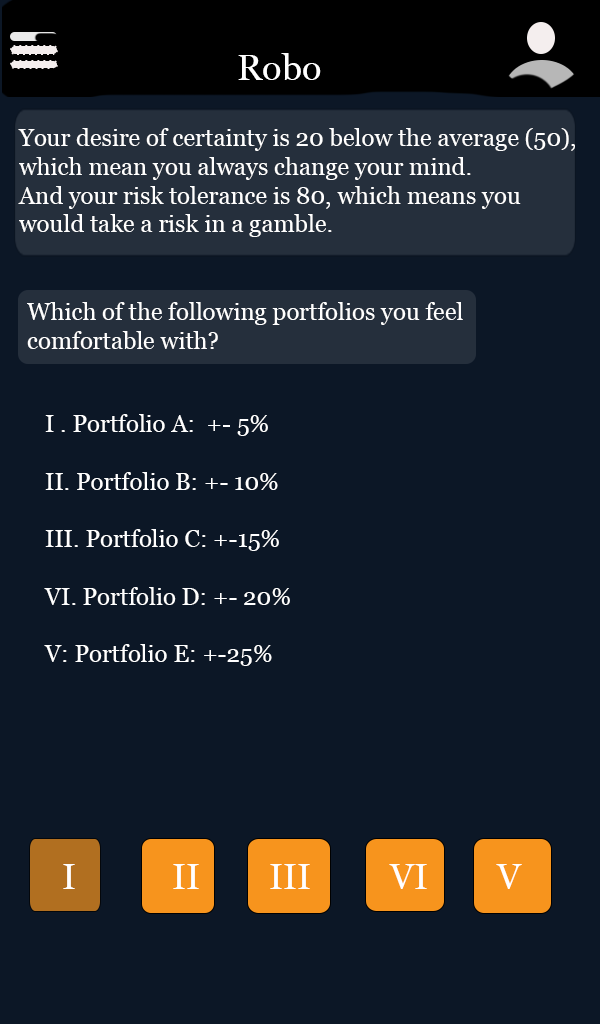
<style>
.page{position:relative;width:600px;height:1024px;background:#0c1726}
.page>*{position:absolute;margin:0}
.t1{font:36px "Georgia";color:#ffffff}
.t2{font:24px "Georgia";color:#ffffff}
</style>
<div class="page">
<p class="t1" style="left:238px;top:53px;width:83px;height:27px">Robo</p>
<p class="t2" style="left:18px;top:128px;width:557px;height:109px">Your desire of certainty is 20 below the average (50),<br>which mean you always change your mind. <br>And your risk tolerance is 80, which means you <br>would take a risk in a gamble.</p>
<p class="t2" style="left:27px;top:302px;width:436px;height:47px">Which of the following portfolios you feel <br>comfortable with?</p>
<p class="t2" style="left:44px;top:414px;width:246px;height:252px">I . Portfolio A:  +- 5% <br><br>II. Portfolio B: +- 10%<br><br>III. Portfolio C: +-15%<br><br>VI. Portfolio D: +- 20%<br><br>V: Portfolio E: +-25%</p>
<p class="t1" style="left:63px;top:864px;width:459px;height:25px">I           II        III         VI        V</p>
</div>
